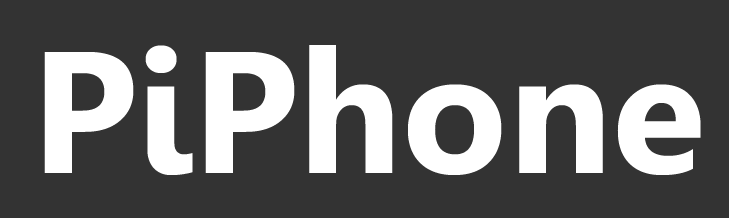
<style>
.page{position:relative;width:729px;height:218px;background:#333333}
.page>*{position:absolute;margin:0}
.t1{font:172.8px "Gisha-Bold";color:#ffffff}
</style>
<div class="page">
<p class="t1" style="left:44px;top:45px;width:657px;height:130px">PiPhone</p>
</div>
